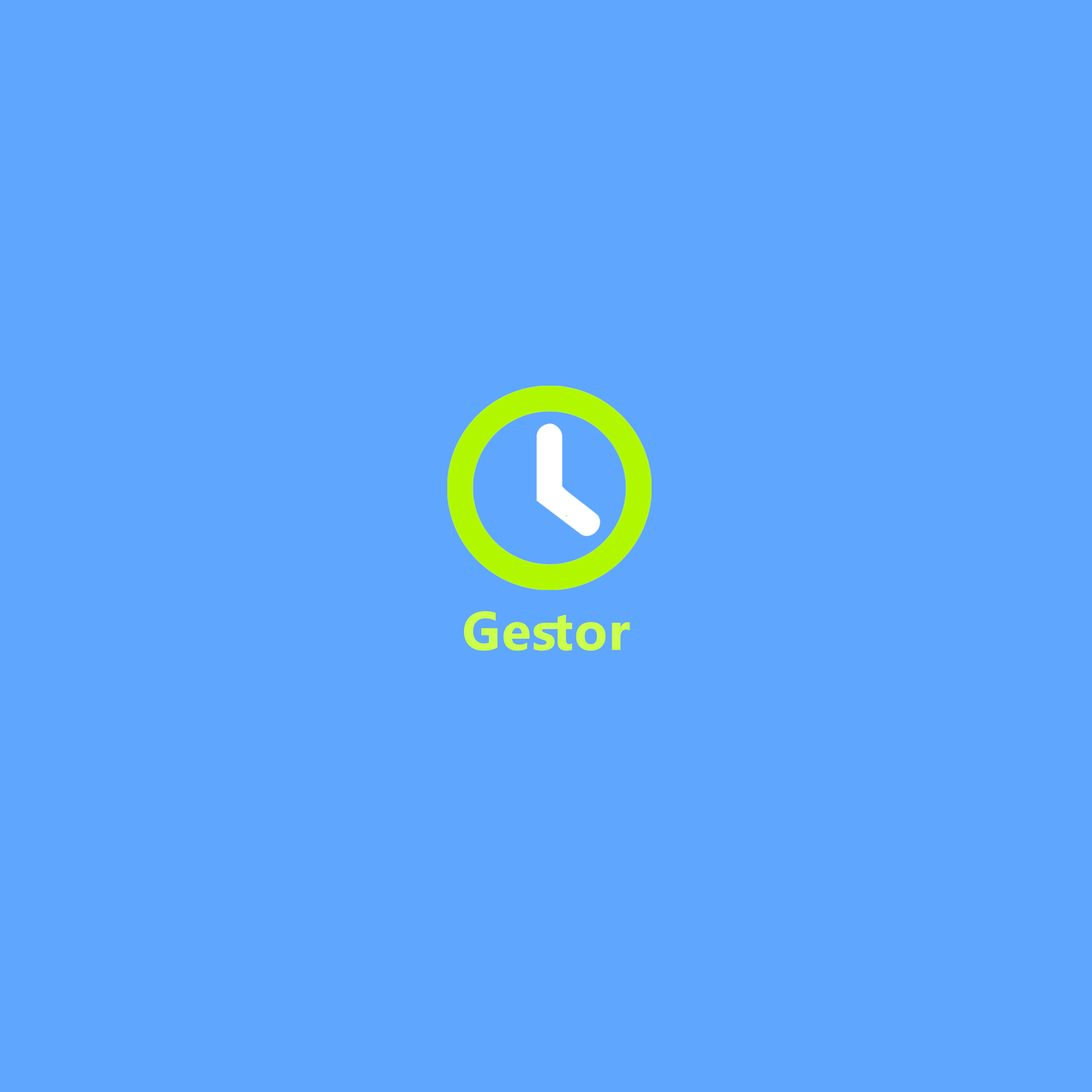
<style>
.page{position:relative;width:1092px;height:1092px;background:#5fa6ff}
.page>*{position:absolute;margin:0}
.t1{font:54.2px "SegoeUI-Bold";letter-spacing:0.02em;color:#cbff4b}
</style>
<div class="page">
<p class="t1" style="left:464px;top:611px;width:166px;height:40px">Gestor</p>
</div>
